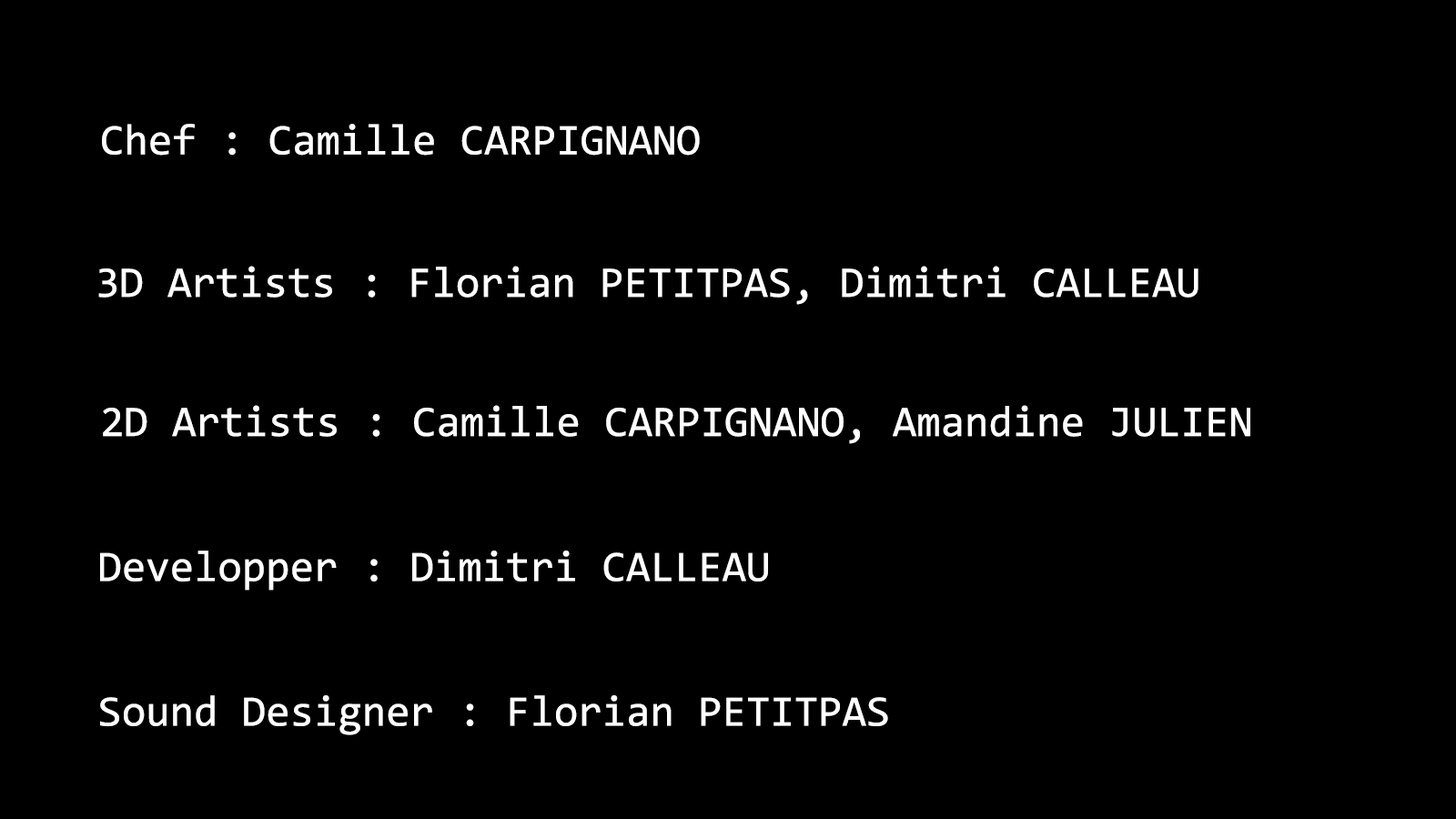
<style>
.page{position:relative;width:1456px;height:819px;background:#000000}
.page>*{position:absolute;margin:0}
.t1{font:43.7px "Consolas";color:#ffffff}
</style>
<div class="page">
<p class="t1" style="left:102px;top:124px;width:598px;height:32px">Chef : Camille CARPIGNANO</p>
<p class="t1" style="left:98px;top:266px;width:1100px;height:39px">3D Artists : Florian PETITPAS, Dimitri CALLEAU</p>
<p class="t1" style="left:103px;top:405px;width:1147px;height:39px">2D Artists : Camille CARPIGNANO, Amandine JULIEN</p>
<p class="t1" style="left:100px;top:551px;width:668px;height:40px">Developper : Dimitri CALLEAU</p>
<p class="t1" style="left:100px;top:695px;width:788px;height:40px">Sound Designer : Florian PETITPAS</p>
</div>
